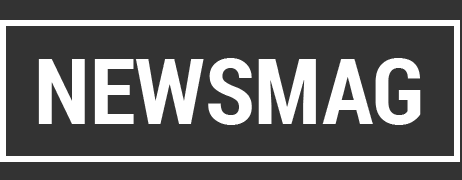
<style>
.page{position:relative;width:462px;height:180px;background:#333333}
.page>*{position:absolute;margin:0}
.t1{font:92px "RobotoCondensed-Bold";color:#ffffff}
</style>
<div class="page">
<p class="t1" style="left:38px;top:58px;width:383px;height:67px">NEWSMAG</p>
</div>
